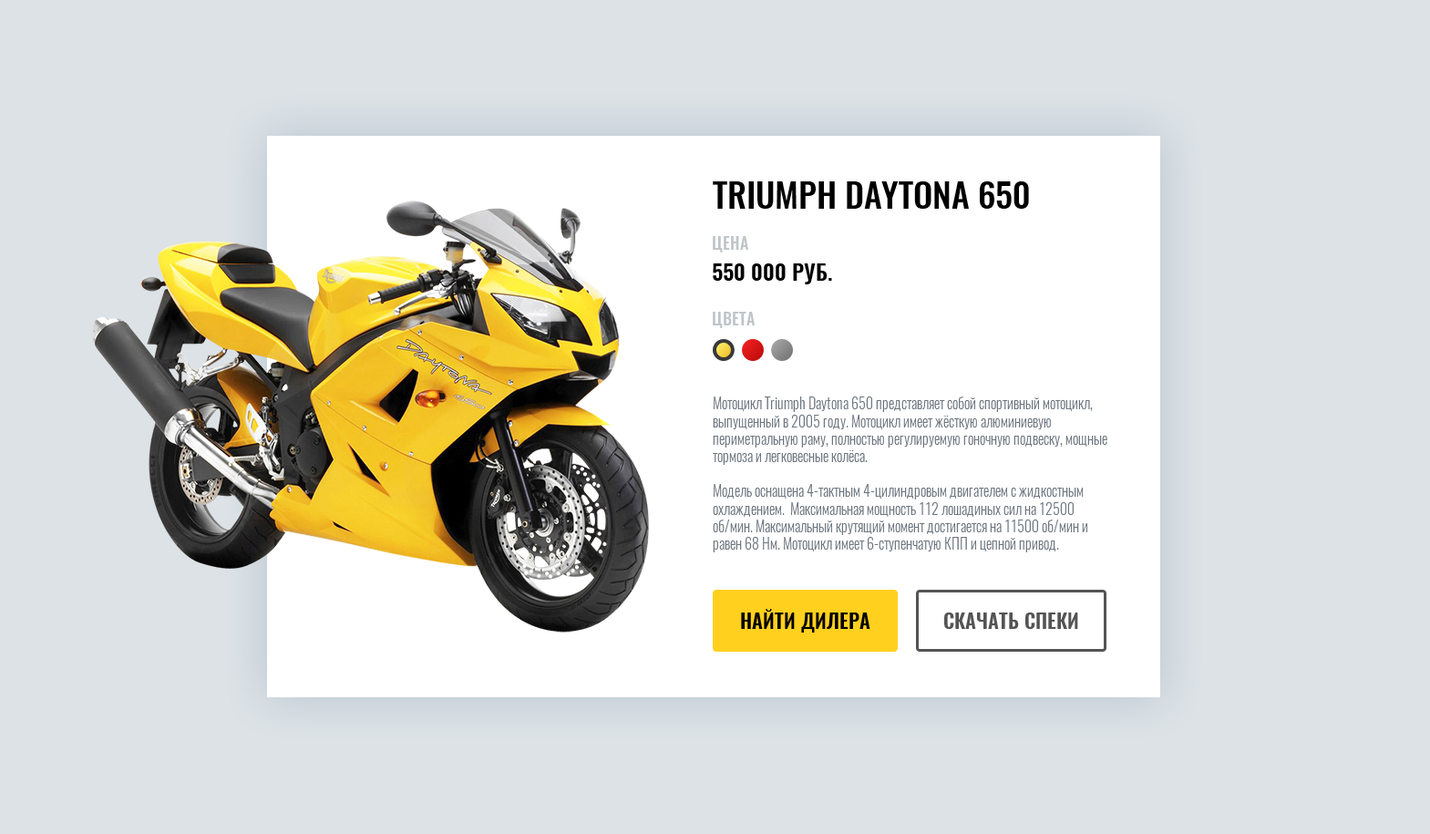
<style>
.page{position:relative;width:1430px;height:834px;background:#dce2e6}
.page>*{position:absolute;margin:0}
.t1{font:34.6px "Oswald-Medium";color:#000000;text-transform:uppercase}
.t2{font:16.4px "Oswald-Medium";color:#bfc5c8;text-transform:uppercase}
.t3{font:21.9px "Oswald-DemiBold";color:#000000;text-transform:uppercase}
.t4{font:14.6px "Oswald-Light";color:#6c757f}
.t5{font:20.1px "Oswald-DemiBold";color:#000000;text-transform:uppercase}
.t6{font:20.1px "Oswald-DemiBold";color:#545454;text-transform:uppercase}
</style>
<div class="page">
<p class="t1" style="left:713px;top:181px;width:316px;height:28px">Triumph Daytona 650</p>
<p class="t2" style="left:713px;top:236px;width:35px;height:16px">Цена</p>
<p class="t3" style="left:713px;top:263px;width:119px;height:21px">550 000 руб.</p>
<p class="t2" style="left:713px;top:312px;width:42px;height:16px">цвета</p>
<p class="t4" style="left:713px;top:396px;width:394px;height:156px">Мотоцикл Triumph Daytona 650 представляет собой спортивный мотоцикл, выпущенный в 2005 году. Мотоцикл имеет жёсткую алюминиевую периметральную раму, полностью регулируемую гоночную подвеску, мощные тормоза и легковесные колёса. <br><br>Модель оснащена 4-тактным 4-цилиндровым двигателем с жидкостным охлаждением.  Максимальная мощность 112 лошадиных сил на 12500 об/мин. Максимальный крутящий момент достигается на 11500 об/мин и равен 68 Нм. Мотоцикл имеет 6-ступенчатую КПП и цепной привод.</p>
<p class="t5" style="left:741px;top:609px;width:129px;height:23px">Найти дилера</p>
<p class="t6" style="left:944px;top:612px;width:134px;height:17px">скачать СПЕКИ</p>
</div>
